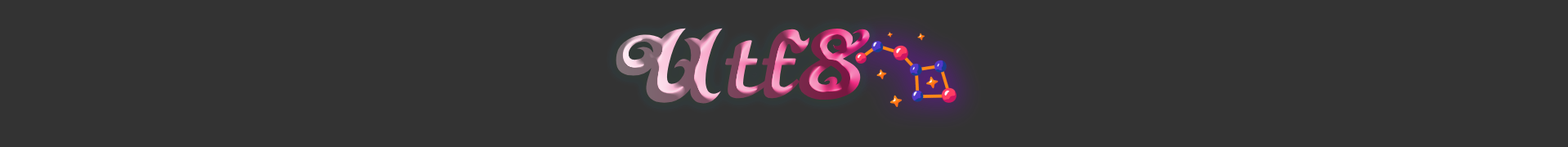
<style>
.page{position:relative;width:1568px;height:147px;background:#333333}
.page>*{position:absolute;margin:0}
.t1{font:108.8px "BlackRose";scale:1.2 1}
</style>
<div class="page">
<p class="t1" style="left:616px;top:28px;width:255px;height:76px">Utf8</p>
</div>
